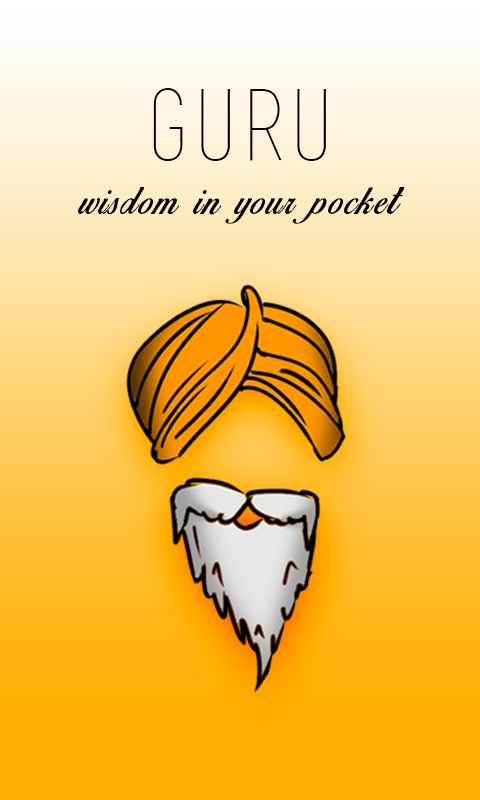
<style>
.page{position:relative;width:480px;height:800px}
.page>*{position:absolute;margin:0}
.t1{font:97.6px "basictitlefont";color:#000000}
.t2{font:97.6px "basictitlefont";color:#ffffff}
.t3{font:38.3px "BirdsofParadise";letter-spacing:0.06em;color:#000000}
</style>
<div class="page">
<p class="t1" style="left:153px;top:88px;width:173px;height:73px"><span class="t2"><br><br></span>guru</p>
<p class="t3" style="left:78px;top:187px;width:327px;height:37px">wisdom in your pocket</p>
</div>
